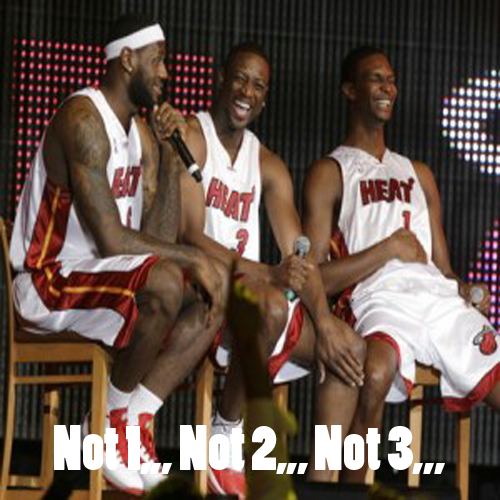
<style>
.page{position:relative;width:500px;height:500px}
.page>*{position:absolute;margin:0}
.t1{font:60px "PoplarStd";color:#ffffff}
</style>
<div class="page">
<p class="t1" style="left:54px;top:425px;width:391px;height:49px">Not 1,,, Not 2,,, Not 3,,,</p>
</div>
